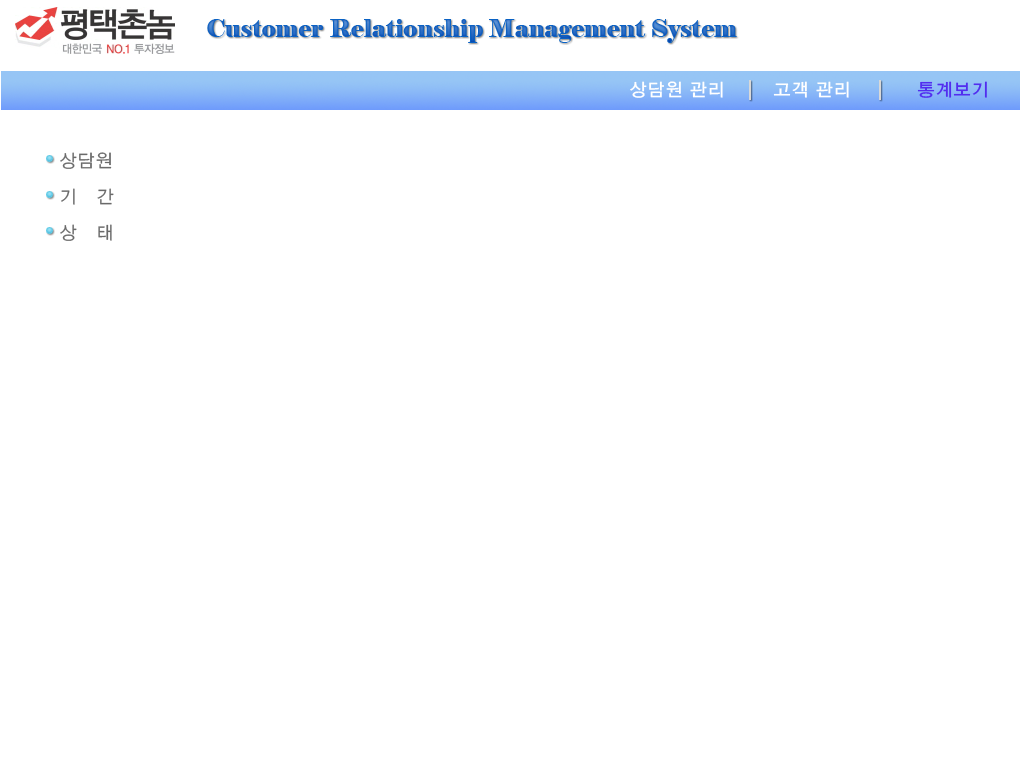
<style>
.page{position:relative;width:1020px;height:768px;background:#ffffff}
.page>*{position:absolute;margin:0}
.t1{font:24px "Elephant-Regular";color:#1762c2}
.t2{font:18px "YGO135";color:#ffffff}
.t3{font:18px "YGO135";color:#522eef}
.t4{font:18px/18px "YGO125";color:#6a6a6a}
</style>
<div class="page">
<p class="t1" style="left:207px;top:19px;width:530px;height:24px">Customer Relationship Management System</p>
<p class="t2" style="left:630px;top:81px;width:357px;height:17px">상담원 관리  고객 관리  <span class="t3">통계보기</span></p>
<p class="t4" style="left:60px;top:152px;width:54px;height:89px">상담원<br><br>기   간<br><br>상   태</p>
</div>
